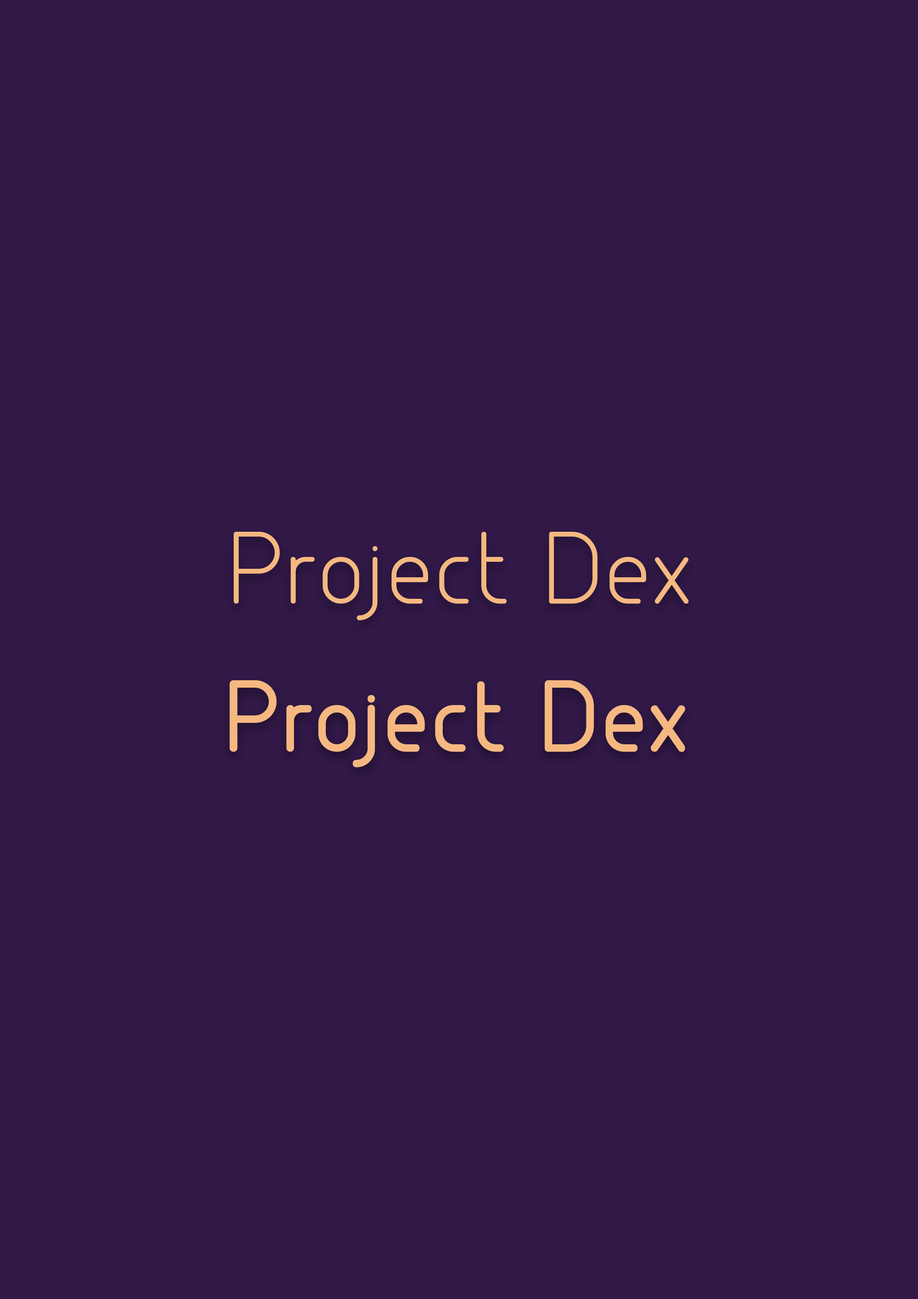
<style>
.page{position:relative;width:918px;height:1299px;background:#311847}
.page>*{position:absolute;margin:0}
.t1{font:94.8px "GreyscaleBasic";letter-spacing:0.05em;color:#f5b880}
.t2{font:94.8px "GreyscaleBasic-Bold";letter-spacing:0.05em;color:#f5b880}
</style>
<div class="page">
<p class="t1" style="left:234px;top:532px;width:455px;height:88px">Project Dex</p>
<p class="t2" style="left:230px;top:680px;width:455px;height:87px">Project Dex</p>
</div>
